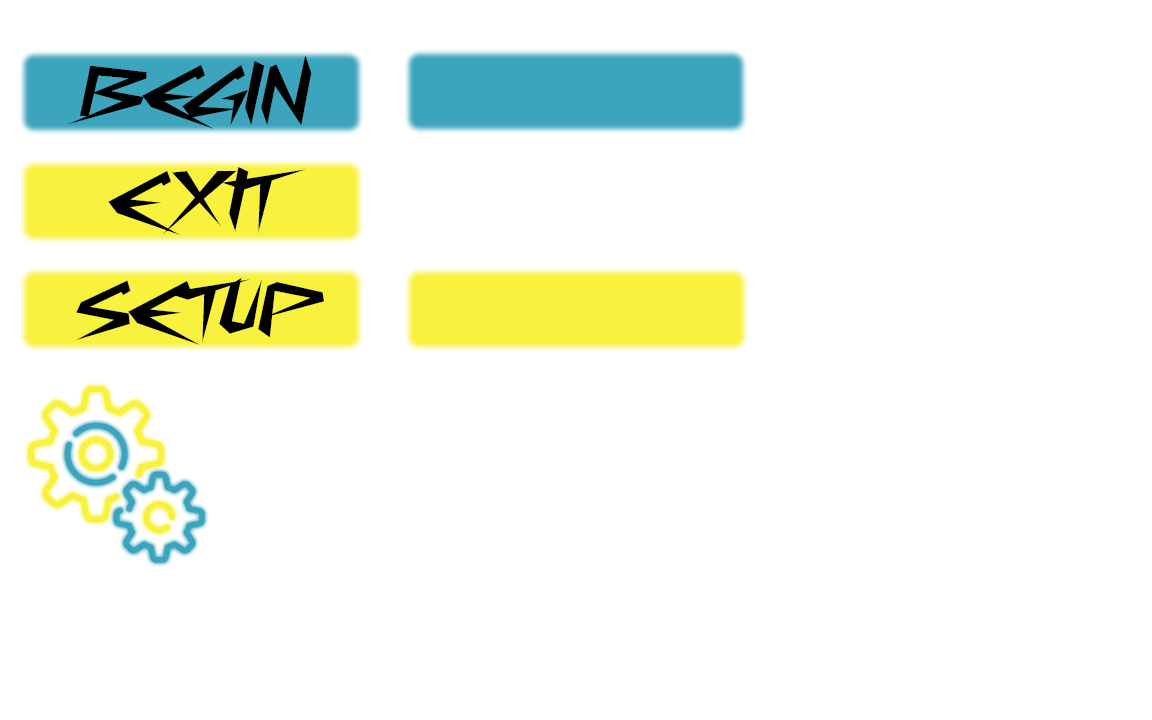
<style>
.page{position:relative;width:1152px;height:720px;background:#ffffff}
.page>*{position:absolute;margin:0}
.t1{font:72px "CyberwayRiders";color:#000000}
</style>
<div class="page">
<p class="t1" style="left:68px;top:55px;width:244px;height:74px">BEGIN</p>
<p class="t1" style="left:108px;top:167px;width:198px;height:68px">EXIT</p>
<p class="t1" style="left:76px;top:278px;width:248px;height:67px">SETUP</p>
</div>
